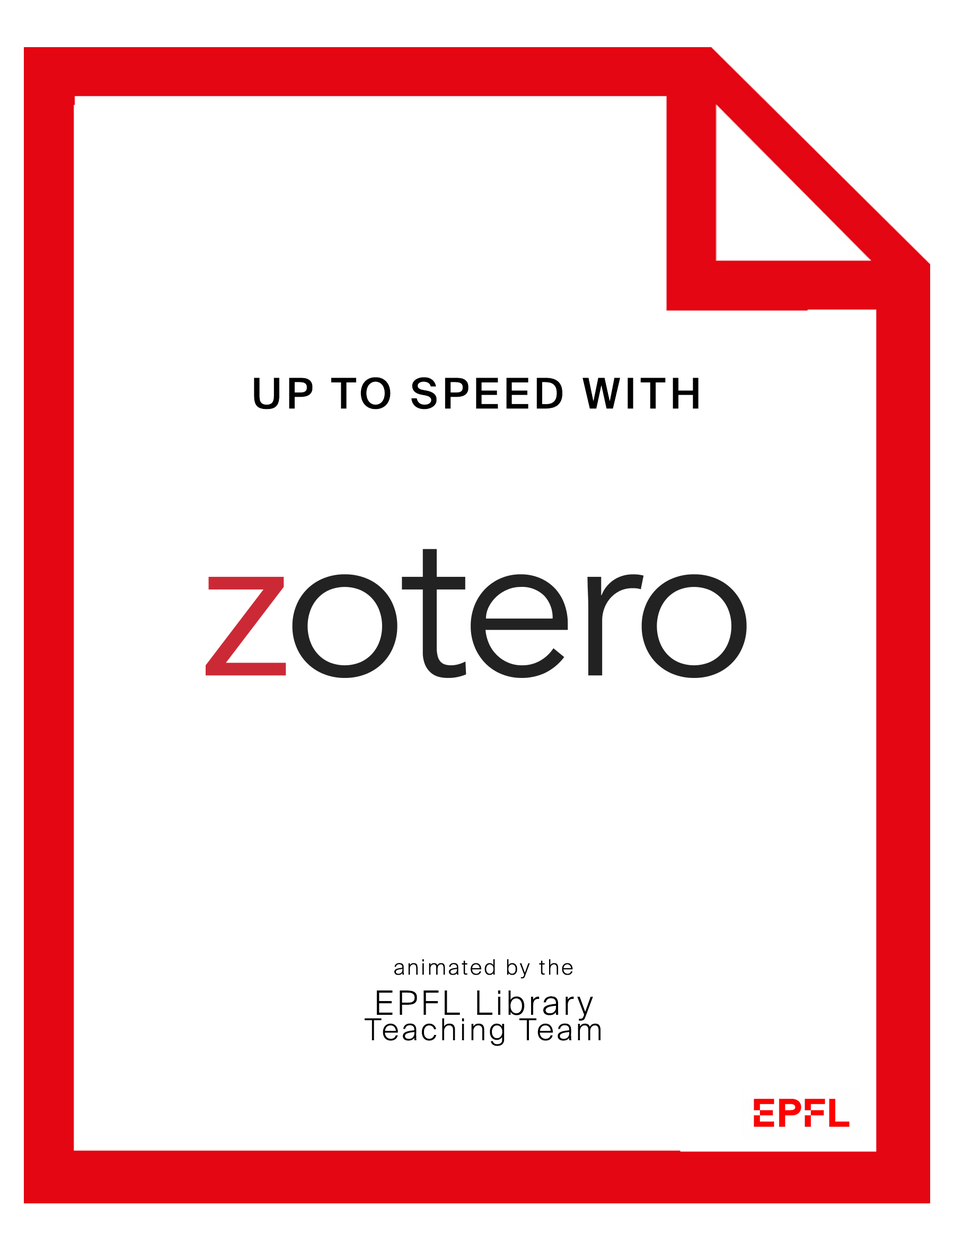
<style>
.page{position:relative;width:954px;height:1250px;background:#ffffff}
.page>*{position:absolute;margin:0}
.t1{font:42.4px "SuisseIntl-Medium";letter-spacing:0.1em;color:#000000}
.t2{font:21.2px "SuisseIntl-Light";letter-spacing:0.1em;color:#000000}
.t3{font:33.4px "SuisseIntl-Light";letter-spacing:0.1em;color:#000000}
.t4{font:30.2px/25.4px "SuisseIntl-Light";letter-spacing:0.1em;color:#000000}
</style>
<div class="page">
<p class="t1" style="left:254px;top:377px;width:444px;height:33px">UP TO SPEED WITH</p>
<p class="t2" style="left:365px;top:959px;width:235px;height:87px;text-align:center">animated by the<br><span class="t3">EPFL Library<br></span><span class="t4">Teaching Team</span></p>
</div>
